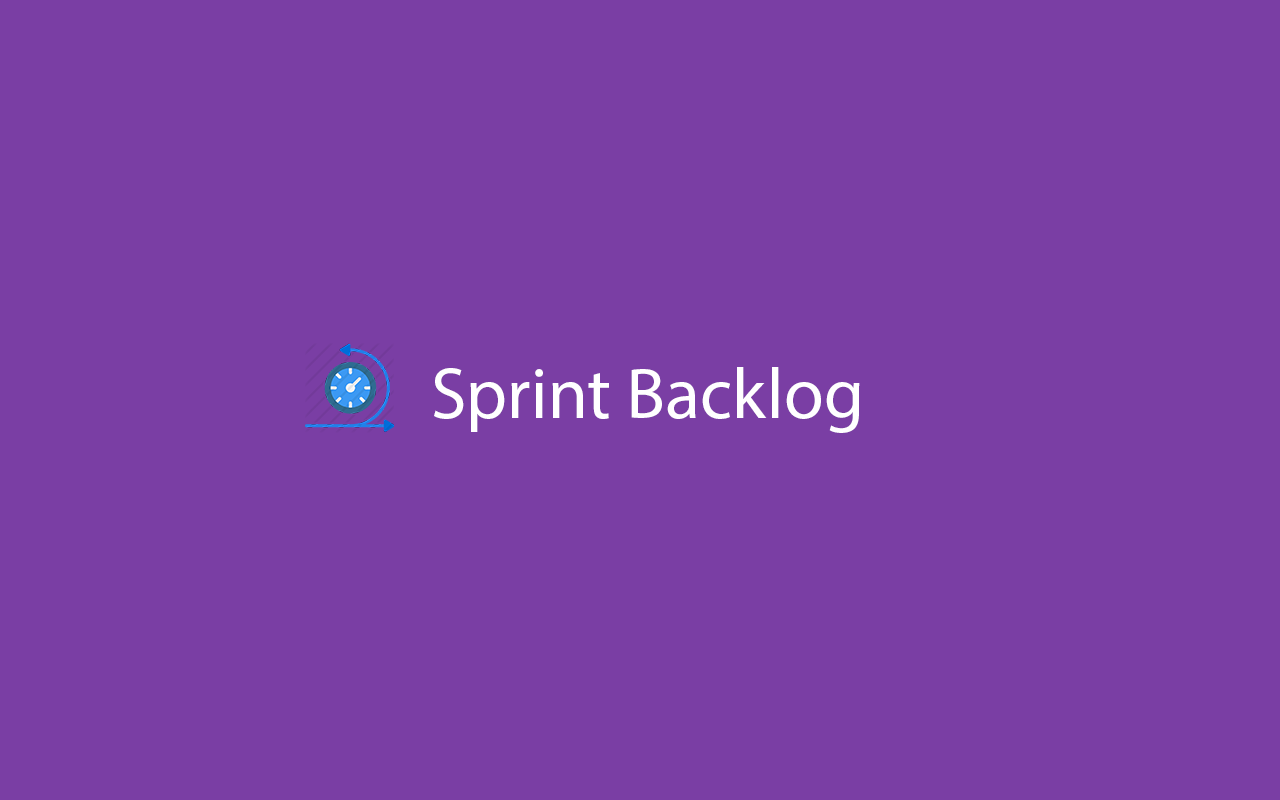
<style>
.page{position:relative;width:1280px;height:800px;background:#7a3ea4}
.page>*{position:absolute;margin:0}
.t1{font:72px "MyriadPro-Regular";color:#ffffff}
</style>
<div class="page">
<p class="t1" style="left:434px;top:367px;width:426px;height:66px">Sprint Backlog</p>
</div>
